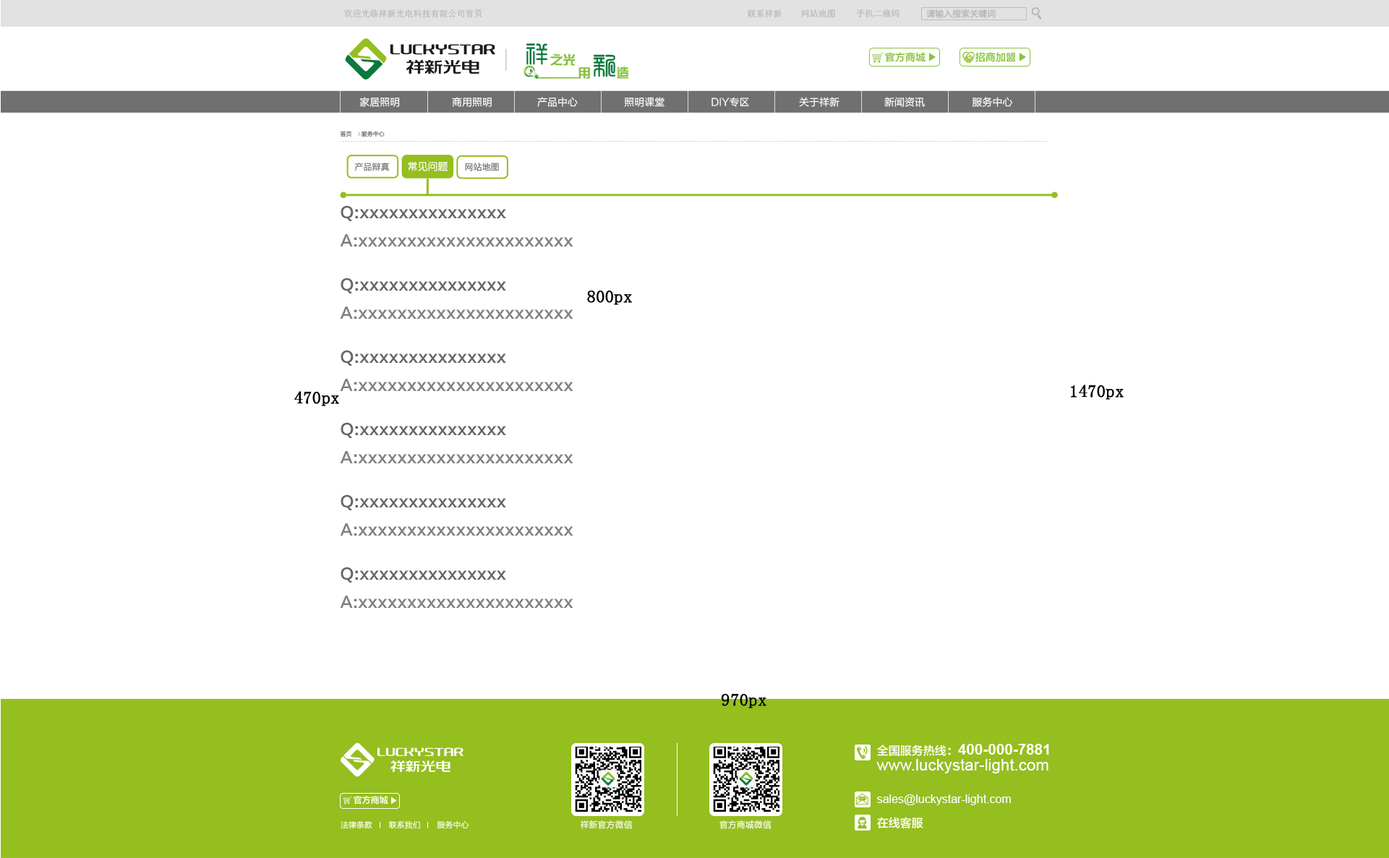
<style>
.page{position:relative;width:1389px;height:858px;background:#ffffff}
.page>*{position:absolute;margin:0}
.t1{font:8.7px "SimSun";color:#afafaf}
.t2{font:8.7px "FZLTHJW--GB1-0";color:#afafaf}
.t3{font:23.4px "JetLink-BoldRightJang";color:#0a793c}
.t4{font:12.8px "FZZYJW--GB1-0";color:#88c23f}
.t5{font:10.2px "FZLTZHK--GBK1-0";color:#88c23f}
.t6{font:23.9px "JetLink-BoldRightJang";color:#0a793c}
.t7{font:10.1px "FZLTHJW--GB1-0";color:#ffffff}
.t8{font:5.8px "FZLTHJW--GB1-0";color:#717071}
.t9{font:8.7px "FZLTHJW--GB1-0";color:#717071}
.t10{font:15.2px "FZLTZHK--GBK1-0";color:#666666}
.t11{font:15.2px "FZLTZHK--GBK1-0";color:#808080}
.t12{font:17.4px "SimSun";color:#000000;font-weight:bold}
.t13{font:15px "Arial-BoldMT";color:#ffffff}
.t14{font:11.6px "FZLTZHK--GBK1-0";color:#ffffff}
.t15{font:16.2px "ArialMT";color:#ffffff}
.t16{font:8.7px "FZLTZHK--GBK1-0";color:#ffffff}
.t17{font:11.6px "ArialMT";color:#ffffff}
.t18{font:8px "FZLTHJW--GB1-0";color:#ffffff}
.t19{font:8px "FZLTHJW--GB1-0"}
.t20{font:8.7px "FZLTHJW--GB1-0";color:#ffffff}
</style>
<div class="page">
<p class="t1" style="left:343px;top:9px;width:139px;height:9px">欢迎光临祥新光电科技有限公司首页</p>
<p class="t1" style="left:748px;top:9px;width:34px;height:9px">联系祥新</p>
<p class="t1" style="left:801px;top:9px;width:34px;height:9px">网站地图</p>
<p class="t1" style="left:856px;top:9px;width:44px;height:8px">手机二维码</p>
<p class="t2" style="left:926px;top:9px;width:70px;height:9px">请输入搜索关键词</p>
<p class="t3" style="left:526px;top:43px;width:21px;height:22px">祥</p>
<p class="t4" style="left:550px;top:54px;width:26px;height:12px">之光</p>
<p class="t5" style="left:885px;top:52px;width:41px;height:10px">官方商城</p>
<p class="t5" style="left:976px;top:52px;width:40px;height:10px">招商加盟</p>
<p class="t6" style="left:594px;top:54px;width:21px;height:23px">新</p>
<p class="t4" style="left:617px;top:67px;width:12px;height:12px">造</p>
<p class="t7" style="left:359px;top:97px;width:41px;height:10px">家居照明</p>
<p class="t7" style="left:452px;top:97px;width:40px;height:10px">商用照明</p>
<p class="t7" style="left:537px;top:97px;width:41px;height:10px">产品中心</p>
<p class="t7" style="left:624px;top:97px;width:41px;height:10px">照明课堂</p>
<p class="t7" style="left:712px;top:97px;width:37px;height:10px">DIY专区</p>
<p class="t7" style="left:799px;top:97px;width:41px;height:10px">关于祥新</p>
<p class="t7" style="left:884px;top:97px;width:41px;height:10px">新闻资讯</p>
<p class="t7" style="left:972px;top:97px;width:41px;height:10px">服务中心</p>
<p class="t8" style="left:340px;top:131px;width:12px;height:6px">首页</p>
<p class="t8" style="left:362px;top:131px;width:23px;height:6px">服务中心</p>
<p class="t7" style="left:408px;top:161px;width:40px;height:10px">常见问题</p>
<p class="t9" style="left:354px;top:163px;width:36px;height:8px">产品辩真</p>
<p class="t9" style="left:465px;top:163px;width:34px;height:8px">网站地图</p>
<p class="t10" style="left:341px;top:205px;width:165px;height:17px">Q:xxxxxxxxxxxxxxx</p>
<p class="t11" style="left:340px;top:234px;width:233px;height:13px">A:xxxxxxxxxxxxxxxxxxxxxx</p>
<p class="t10" style="left:341px;top:278px;width:165px;height:16px">Q:xxxxxxxxxxxxxxx</p>
<p class="t12" style="left:587px;top:291px;width:45px;height:14px">800px</p>
<p class="t11" style="left:340px;top:307px;width:233px;height:12px">A:xxxxxxxxxxxxxxxxxxxxxx</p>
<p class="t10" style="left:341px;top:350px;width:165px;height:17px">Q:xxxxxxxxxxxxxxx</p>
<p class="t11" style="left:340px;top:379px;width:233px;height:12px">A:xxxxxxxxxxxxxxxxxxxxxx</p>
<p class="t12" style="left:1071px;top:385px;width:53px;height:15px">1470px</p>
<p class="t12" style="left:294px;top:391px;width:45px;height:15px">470px</p>
<p class="t10" style="left:341px;top:422px;width:165px;height:17px">Q:xxxxxxxxxxxxxxx</p>
<p class="t11" style="left:340px;top:451px;width:233px;height:13px">A:xxxxxxxxxxxxxxxxxxxxxx</p>
<p class="t10" style="left:341px;top:495px;width:165px;height:16px">Q:xxxxxxxxxxxxxxx</p>
<p class="t11" style="left:340px;top:524px;width:233px;height:12px">A:xxxxxxxxxxxxxxxxxxxxxx</p>
<p class="t10" style="left:341px;top:567px;width:165px;height:17px">Q:xxxxxxxxxxxxxxx</p>
<p class="t11" style="left:340px;top:596px;width:233px;height:12px">A:xxxxxxxxxxxxxxxxxxxxxx</p>
<p class="t12" style="left:721px;top:694px;width:46px;height:15px">970px</p>
<p class="t13" style="left:877px;top:744px;width:172px;height:13px"><span class="t14">全国服务热线：</span>400-000-7881</p>
<p class="t15" style="left:876px;top:759px;width:173px;height:15px">www.luckystar-light.com</p>
<p class="t16" style="left:354px;top:796px;width:34px;height:9px">官方商城</p>
<p class="t17" style="left:877px;top:795px;width:134px;height:11px">sales@luckystar-light.com</p>
<p class="t18" style="left:341px;top:821px;width:31px;height:8px">法律条款</p>
<p class="t19" style="left:388px;top:821px;width:32px;height:8px">联系我们</p>
<p class="t19" style="left:437px;top:821px;width:32px;height:8px">服务中心</p>
<p class="t20" style="left:580px;top:821px;width:53px;height:8px">祥新官方微信</p>
<p class="t20" style="left:720px;top:821px;width:52px;height:8px">官方商城微信</p>
<p class="t14" style="left:877px;top:817px;width:46px;height:12px">在线客服</p>
</div>
